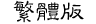
<style>
.page{position:relative;width:96px;height:24px;background:#ffffff}
.page>*{position:absolute;margin:0}
.t1{font:24px "IDLiLight";color:#000000}
</style>
<div class="page">
<p class="t1" style="left:13px;top:0px;width:71px;height:23px">繁體版</p>
</div>
